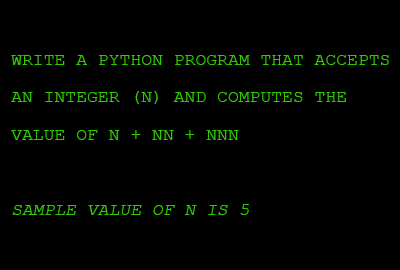
<style>
.page{position:relative;width:400px;height:270px;background:#000000}
.page>*{position:absolute;margin:0}
.t1{font:18.1px/37.5px "CourierNewPSMT";color:#30cc00;text-transform:uppercase}
.t2{font:18.1px/37.5px "CourierNewPSMT";color:#30cc00;text-transform:uppercase;font-style:italic}
</style>
<div class="page">
<p class="t1" style="left:11px;top:55px;width:378px;height:160px">Write a python program that accepts<br>an integer (n) and computes the<br>value of n + nn + nnn<br><br><span class="t2">sample value of n is 5</span></p>
</div>
